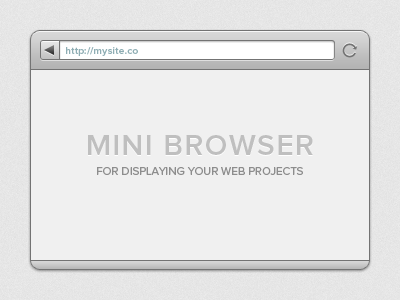
<style>
.page{position:relative;width:400px;height:300px;background:#f0f0f0}
.page>*{position:absolute;margin:0}
.t1{font:10px "ProximaNova-Semibold";letter-spacing:0.025em;color:#8faeb4}
.t2{font:30px "ProximaNova-Semibold";letter-spacing:0.05em;color:#bfbfbf}
.t3{font:11.5px "ProximaNova-Regular";color:#8d8d8d}
</style>
<div class="page">
<p class="t1" style="left:66px;top:47px;width:72px;height:9px">http://mysite.co</p>
<p class="t2" style="left:88px;top:135px;width:225px;height:20px">MINI BROWSER</p>
<p class="t3" style="left:97px;top:167px;width:206px;height:8px">FOR DISPLAYING YOUR WEB PROJECTS</p>
</div>
